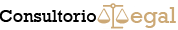
<style>
.page{position:relative;width:178px;height:30px;background:#ffffff}
.page>*{position:absolute;margin:0}
.t1{font:18.1px "Rockwell";color:#000000}
.t2{font:23px "Rockwell";color:#cca976}
</style>
<div class="page">
<p class="t1" style="left:0px;top:10px;width:96px;height:12px">Consultorio</p>
<p class="t2" style="left:130px;top:7px;width:46px;height:21px">egal</p>
</div>
